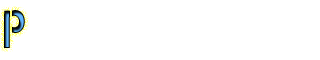
<style>
.page{position:relative;width:320px;height:60px;background:#ffffff}
.page>*{position:absolute;margin:0}
.t1{font:52.7px "XXIISTRAIGHT-ARMY"}
</style>
<div class="page">
<p class="t1" style="left:4px;top:10px;width:21px;height:38px">P</p>
</div>
